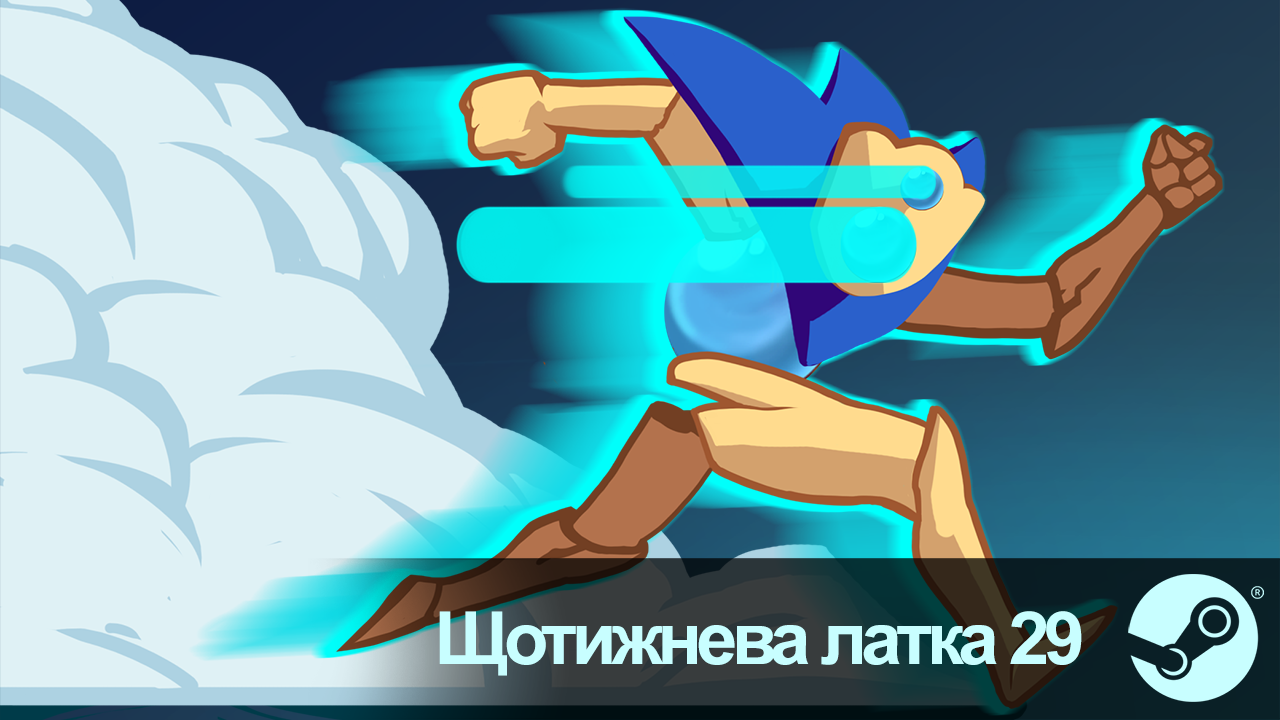
<style>
.page{position:relative;width:1280px;height:720px}
.page>*{position:absolute;margin:0}
.t1{font:73.3px "Arial-BoldMT";letter-spacing:-0.075em;color:#c8feff}
</style>
<div class="page">
<p class="t1" style="left:439px;top:611px;width:643px;height:65px">Щотижнева латка 29</p>
</div>
